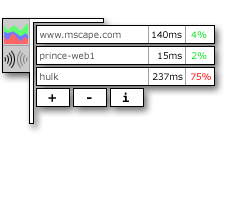
<style>
.page{position:relative;width:250px;height:200px;background:#ffffff}
.page>*{position:absolute;margin:0}
.t1{font:9px "Verdana";color:#4f4f4f}
.t2{font:9px "Verdana"}
.t3{font:9px "Verdana";color:#00e516}
.t4{font:9px "Verdana";color:#000000}
.t5{font:12px "Verdana-Bold";color:#000000}
.t6{font:14px "Courier-Bold";color:#000000}
</style>
<div class="page">
<p class="t1" style="left:40px;top:32px;width:81px;height:8px">www.mscape.com</p>
<p class="t2" style="left:152px;top:31px;width:30px;height:7px">140ms</p>
<p class="t2" style="left:191px;top:31px;width:16px;height:7px">4%</p>
<p class="t2" style="left:40px;top:52px;width:54px;height:9px">prince-web1</p>
<p class="t2" style="left:158px;top:52px;width:24px;height:7px">15ms</p>
<p class="t3" style="left:192px;top:52px;width:15px;height:7px">2%</p>
<p class="t2" style="left:40px;top:73px;width:19px;height:7px">hulk</p>
<p class="t4" style="left:153px;top:73px;width:30px;height:7px">237ms</p>
<p class="t2" style="left:191px;top:73px;width:20px;height:7px">75%</p>
<p class="t5" style="left:48px;top:94px;width:8px;height:8px">+</p>
<p class="t5" style="left:87px;top:97px;width:5px;height:2px">-</p>
<p class="t6" style="left:122px;top:92px;width:7px;height:10px">i</p>
</div>
